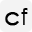
<style>
.page{position:relative;width:32px;height:32px;background:#f3f3f3}
.page>*{position:absolute;margin:0}
.t1{font:24px "CenturyGothic";color:#000000;font-weight:bold}
.t2{font:24px "CenturyGothic";color:#000000}
</style>
<div class="page">
<p class="t1" style="left:5px;top:8px;width:23px;height:18px">c<span class="t2">f</span></p>
</div>
